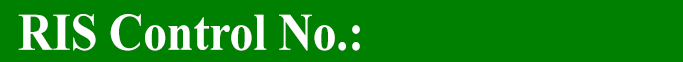
<style>
.page{position:relative;width:683px;height:62px;background:#008000}
.page>*{position:absolute;margin:0}
.t1{font:52.6px "TimesNewRomanPS-BoldMT";color:#ffffff;scale:0.9 1}
</style>
<div class="page">
<p class="t1" style="left:18px;top:14px;width:342px;height:37px">RIS Control No.:</p>
</div>
